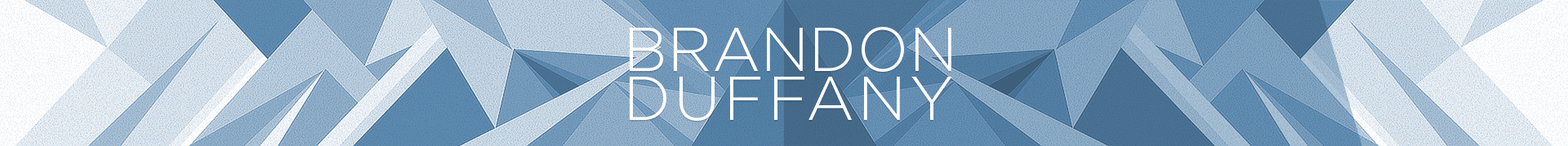
<style>
.page{position:relative;width:1568px;height:146px}
.page>*{position:absolute;margin:0}
.t1{font:61.3px/49px "GothamHTF-Light";color:#ffffff;text-transform:uppercase}
.t2{font:61.3px/49px "GothamHTF-Light";letter-spacing:0.054em;color:#ffffff;text-transform:uppercase}
</style>
<div class="page">
<p class="t1" style="left:630px;top:27px;width:322px;height:94px;text-align:center">BRANDON<br> <span class="t2">DUFFANY</span></p>
</div>
